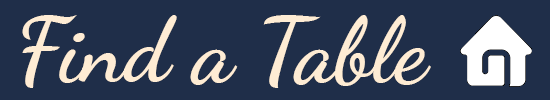
<style>
.page{position:relative;width:550px;height:100px;background:#1f2e49}
.page>*{position:absolute;margin:0}
.t1{font:90.7px "DancingScript-Bold";color:#feecd4}
</style>
<div class="page">
<p class="t1" style="left:22px;top:15px;width:409px;height:73px">Find a Table</p>
</div>
